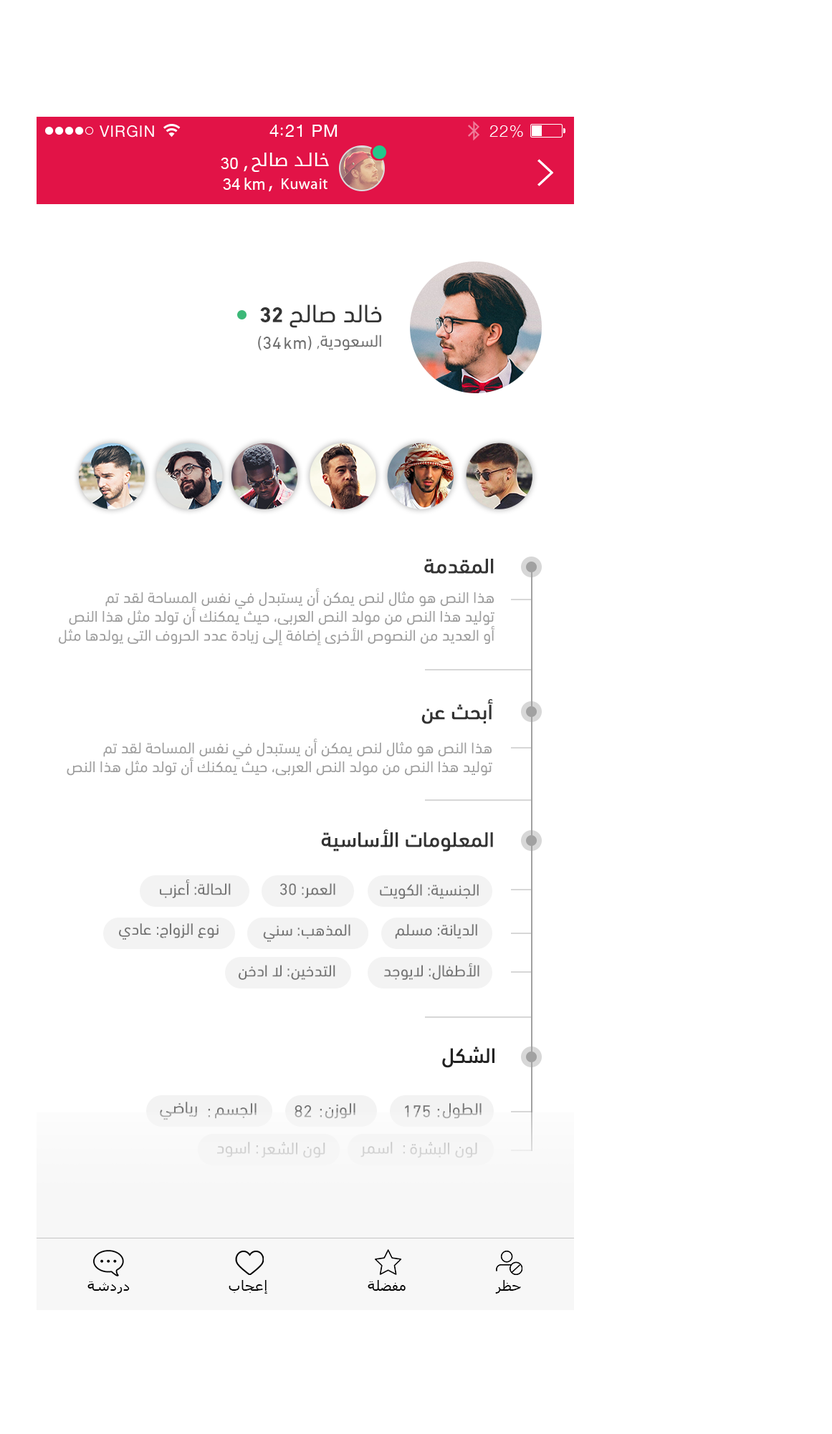
<style>
.page{position:relative;width:832px;height:1434px;background:#ffffff}
.page>*{position:absolute;margin:0}
.t1{font:15.8px "ArialMT";letter-spacing:0.029em;color:#ffffff}
.t2{font:21.5px "MyriadPro-Regular";letter-spacing:0.029em;color:#ffffff}
.t3{font:17.9px "DroidArabicKufi";letter-spacing:0.029em;color:#ffffff}
.t4{font:15.8px "Tahoma";letter-spacing:0.029em;color:#ffffff}
.t5{font:15.8px "MyriadPro-Regular";letter-spacing:0.029em;color:#ffffff}
.t6{font:25.8px "DINNextLTArabic-Regular";color:#333333;text-transform:uppercase}
.t7{font:21.5px "DINNextLTArabic-Bold";color:#333333}
.t8{font:17.2px "DINNextLTArabic-Regular";letter-spacing:0.029em;color:#6e6e6e}
.t9{font:17.2px "DINNextLTArabic-Regular";color:#6e6e6e}
.t10{font:12.9px "MyriadPro-Regular";color:#6e6e6e}
.t11{font:21.5px "DINNextLTArabic-Medium";color:#333333}
.t12{font:15.8px "DINNextLTArabic-Regular";color:#9d9d9d}
.t13{font:16.4px "DINNextLTArabic-Regular";color:#757575}
.t14{font:21.5px "DINNextLTArabic-Medium";color:#222222}
.t15{font:17.2px "DINNextLTArabic-Regular";text-transform:uppercase}
.t16{font:17.2px "DINNextLTArabic-Regular";color:#757575;text-transform:uppercase}
.t17{font:17.2px "DINNextLTArabic-Regular";color:#d1d1d1;text-transform:uppercase}
.t18{font:17.2px "DINNextLTArabic-Regular";color:#cfcfcf;text-transform:uppercase}
.t19{font:14.3px "Tahoma";letter-spacing:0.029em;color:#000000}
</style>
<div class="page">
<p class="t1" style="left:221px;top:158px;width:26px;height:14px">30 <span class="t2">,</span></p>
<p class="t3" style="left:251px;top:153px;width:78px;height:19px">خالد صالح</p>
<p class="t1" style="left:223px;top:178px;width:17px;height:12px">34</p>
<p class="t4" style="left:244px;top:178px;width:20px;height:12px">km</p>
<p class="t5" style="left:269px;top:178px;width:58px;height:14px"><span class="t2">,</span>  Kuwait</p>
<p class="t6" style="left:289px;top:304px;width:93px;height:24px">خالد صالح</p>
<p class="t7" style="left:260px;top:307px;width:22px;height:15px">32</p>
<p class="t8" style="left:258px;top:336px;width:23px;height:14px">(34</p>
<p class="t8" style="left:284px;top:336px;width:28px;height:14px">km)</p>
<p class="t9" style="left:320px;top:334px;width:61px;height:16px">السعودية</p>
<p class="t10" style="left:317px;top:345px;width:2px;height:5px">,</p>
<p class="t11" style="left:424px;top:559px;width:70px;height:15px">المقدمة</p>
<p class="t12" style="left:59px;top:588px;width:436px;height:57px;text-align:right">هذا النص هو مثال لنص يمكن أن يستبدل في نفس المساحة لقد تم<br> توليد هذا النص من مولد النص العربى، حيث يمكنك أن تولد مثل هذا النص<br> أو العديد من النصوص الأخرى إضافة إلى زيادة عدد الحروف التى يولدها مثل</p>
<p class="t11" style="left:421px;top:699px;width:72px;height:25px">أبحث عن</p>
<p class="t12" style="left:67px;top:738px;width:425px;height:38px;text-align:right">هذا النص هو مثال لنص يمكن أن يستبدل في نفس المساحة لقد تم<br> توليد هذا النص من مولد النص العربى، حيث يمكنك أن تولد مثل هذا النص</p>
<p class="t11" style="left:321px;top:829px;width:172px;height:23px">المعلومات الأساسية</p>
<p class="t13" style="left:160px;top:879px;width:71px;height:19px">الحالة: أعزب</p>
<p class="t13" style="left:280px;top:883px;width:55px;height:15px">العمر: 30</p>
<p class="t13" style="left:380px;top:884px;width:98px;height:15px">الجنسية: الكويت</p>
<p class="t13" style="left:119px;top:923px;width:99px;height:17px">نوع الزواج: عادي</p>
<p class="t13" style="left:263px;top:924px;width:87px;height:18px">المذهب: سني</p>
<p class="t13" style="left:395px;top:924px;width:82px;height:15px">الديانة: مسلم</p>
<p class="t13" style="left:239px;top:965px;width:96px;height:15px">التدخين: لا ادخن</p>
<p class="t13" style="left:384px;top:963px;width:95px;height:17px">الأطفال: لايوجد</p>
<p class="t14" style="left:442px;top:1046px;width:52px;height:22px">الشكل</p>
<p class="t15" style="left:160px;top:1102px;width:37px;height:18px">رياضي</p>
<p class="t15" style="left:208px;top:1109px;width:2px;height:8px">:</p>
<p class="t15" style="left:215px;top:1103px;width:41px;height:16px">الجسم</p>
<p class="t16" style="left:294px;top:1105px;width:17px;height:12px">82</p>
<p class="t15" style="left:319px;top:1109px;width:3px;height:8px">:</p>
<p class="t15" style="left:324px;top:1103px;width:31px;height:16px">الوزن</p>
<p class="t16" style="left:405px;top:1105px;width:25px;height:12px">175</p>
<p class="t15" style="left:437px;top:1109px;width:2px;height:8px">:</p>
<p class="t15" style="left:442px;top:1103px;width:39px;height:16px">الطول</p>
<p class="t17" style="left:217px;top:1142px;width:33px;height:15px">اسود</p>
<p class="t18" style="left:256px;top:1145px;width:2px;height:9px">:</p>
<p class="t17" style="left:261px;top:1142px;width:64px;height:16px">لون الشعر</p>
<p class="t17" style="left:360px;top:1142px;width:33px;height:15px">اسمر</p>
<p class="t18" style="left:403px;top:1145px;width:2px;height:9px">:</p>
<p class="t17" style="left:410px;top:1142px;width:67px;height:16px">لون البشرة</p>
<p class="t19" style="left:87px;top:1281px;width:43px;height:13px">دردشة</p>
<p class="t19" style="left:228px;top:1280px;width:39px;height:14px">إعجاب</p>
<p class="t19" style="left:367px;top:1280px;width:38px;height:11px">مفضلة</p>
<p class="t19" style="left:495px;top:1280px;width:26px;height:14px">حظر</p>
</div>
